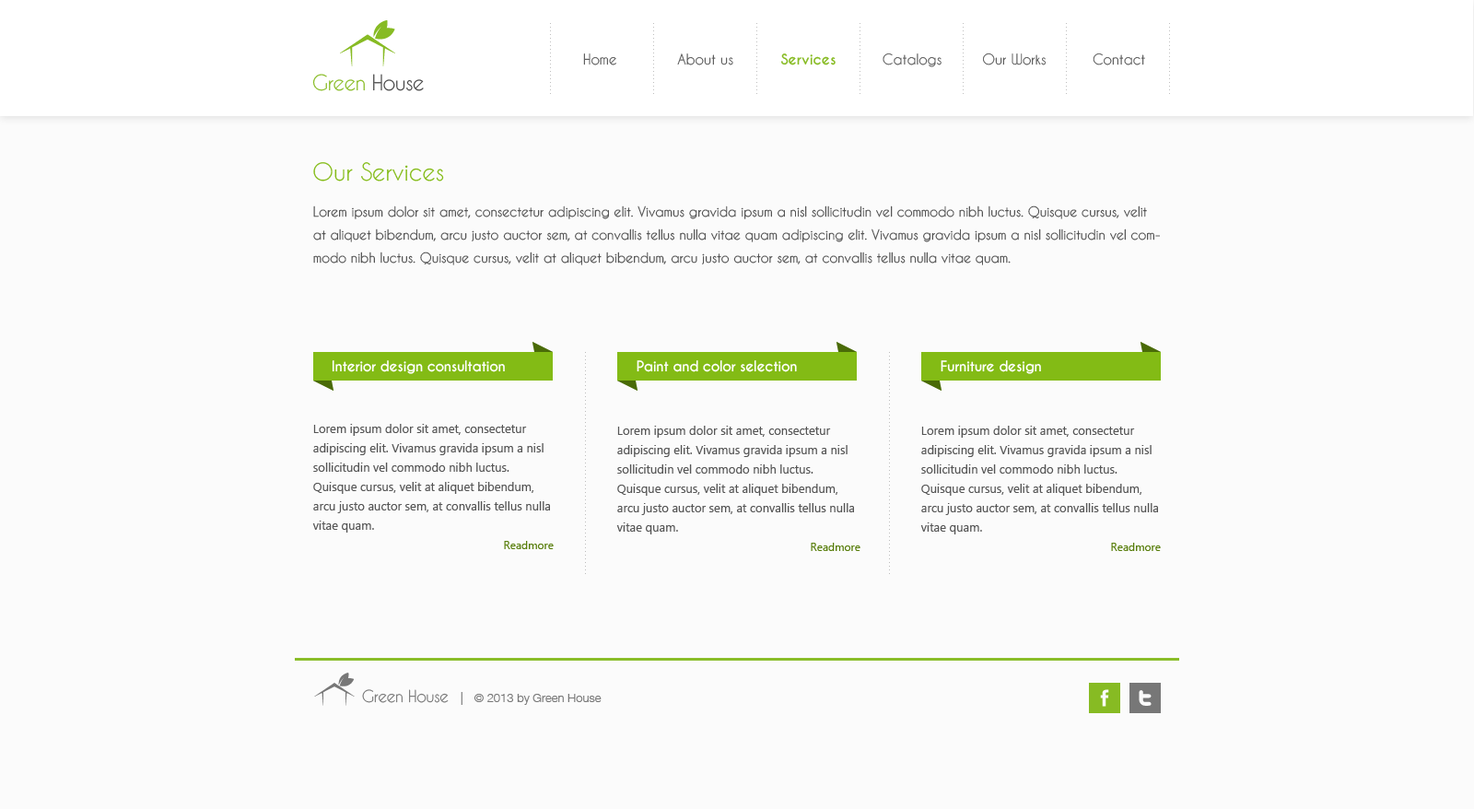
<style>
.page{position:relative;width:1474px;height:809px;background:#fbfbfb}
.page>*{position:absolute;margin:0}
.t1{font:13.8px "CaviarDreams";color:#555555}
.t2{font:13.8px "CaviarDreams-Bold";color:#87bb23}
.t3{font:20.3px "CaviarDreams";letter-spacing:-0.025em;color:#87bb23}
.t4{font:20.3px "CaviarDreams";letter-spacing:-0.025em;color:#444444}
.t5{font:23px "CaviarDreams";color:#83bb15}
.t6{font:12.9px/23px "CaviarDreams";color:#555555}
.t7{font:13.8px "CaviarDreams-Bold";letter-spacing:-0.025em;color:#ffffff}
.t8{font:12px/19.3px "SegoeUI";color:#555555}
.t9{font:11.1px/19.3px "SegoeUI";color:#577d0a}
.t10{font:15.7px "CaviarDreams";letter-spacing:-0.025em;color:#777777}
.t11{font:12px "HelveticaNeueW02-45Light";color:#777777}
.t12{font:12.9px "HelveticaNeueW02-45Light";color:#777777}
</style>
<div class="page">
<p class="t1" style="left:583px;top:53px;width:562px;height:14px">Home         About us           <span class="t2">Services       </span>Catalogs   Our Works          Contact</p>
<p class="t3" style="left:312px;top:74px;width:112px;height:17px">Green <span class="t4">House</span></p>
<p class="t5" style="left:313px;top:162px;width:131px;height:19px">Our Services</p>
<p class="t6" style="left:313px;top:205px;width:847px;height:60px">Lorem ipsum dolor sit amet, consectetur adipiscing elit. Vivamus gravida ipsum a nisl sollicitudin vel commodo nibh luctus. Quisque cursus, velit at aliquet bibendum, arcu justo auctor sem, at convallis tellus nulla vitae quam adipiscing elit. Vivamus gravida ipsum a nisl sollicitudin vel commodo nibh luctus. Quisque cursus, velit at aliquet bibendum, arcu justo auctor sem, at convallis tellus nulla vitae quam.</p>
<p class="t7" style="left:332px;top:360px;width:173px;height:14px">Interior design consultation</p>
<p class="t7" style="left:637px;top:360px;width:160px;height:12px">Paint and color selection</p>
<p class="t7" style="left:941px;top:360px;width:100px;height:14px">Furniture design</p>
<p class="t8" style="left:312px;top:424px;width:242px;height:125px">Lorem ipsum dolor sit amet, consectetur adipiscing elit. Vivamus gravida ipsum a nisl sollicitudin vel commodo nibh luctus. Quisque cursus, velit at aliquet bibendum, arcu justo auctor sem, at convallis tellus nulla vitae quam. <br><span class="t9">Readmore</span></p>
<p class="t8" style="left:616px;top:426px;width:245px;height:125px">Lorem ipsum dolor sit amet, consectetur adipiscing elit. Vivamus gravida ipsum a nisl sollicitudin vel commodo nibh luctus. Quisque cursus, velit at aliquet bibendum, arcu justo auctor sem, at convallis tellus nulla vitae quam. <br><span class="t9">Readmore</span></p>
<p class="t8" style="left:920px;top:426px;width:241px;height:125px">Lorem ipsum dolor sit amet, consectetur adipiscing elit. Vivamus gravida ipsum a nisl sollicitudin vel commodo nibh luctus. Quisque cursus, velit at aliquet bibendum, arcu justo auctor sem, at convallis tellus nulla vitae quam. <br><span class="t9">Readmore</span></p>
<p class="t10" style="left:362px;top:689px;width:87px;height:14px">Green House</p>
<p class="t11" style="left:461px;top:692px;width:141px;height:13px"><span class="t12">|   </span>© 2013 by Green House</p>
</div>
